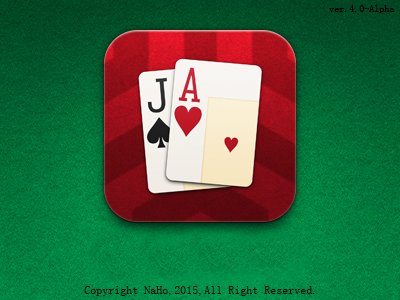
<style>
.page{position:relative;width:400px;height:300px}
.page>*{position:absolute;margin:0}
.t1{font:10px "SimSun";color:#000000}
.t2{font:12px "SimSun";color:#000000}
</style>
<div class="page">
<p class="t1" style="left:329px;top:4px;width:66px;height:9px">ver.4.0-Alpha</p>
<p class="t2" style="left:84px;top:286px;width:231px;height:10px">Copyright NaHo,2015,All Right Reserved.</p>
</div>
